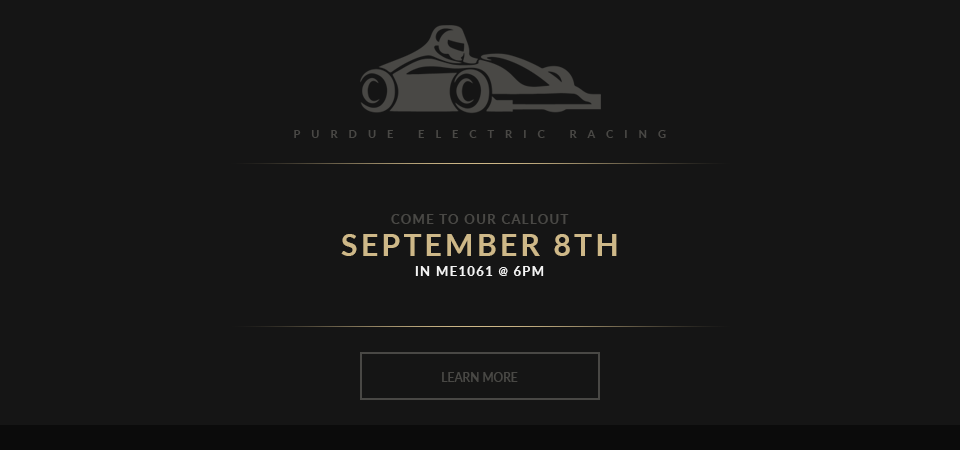
<style>
.page{position:relative;width:960px;height:450px;background:#151515}
.page>*{position:absolute;margin:0}
.t1{font:13.1px "Lato-Bold";letter-spacing:0.1em;color:#494845}
.t2{font:30.4px "Lato-Bold";letter-spacing:0.1em;color:#ceb888;text-transform:uppercase}
.t3{font:13.1px "Lato-Bold";letter-spacing:0.1em;color:#f4f4f4;text-transform:uppercase}
.t4{font:11px "Lato-Bold";letter-spacing:0.1em;color:#f4f4f4;text-transform:uppercase}
.t5{font:12px "Lato-Medium";color:#494845}
</style>
<div class="page">
<p class="t1" style="left:391px;top:214px;width:178px;height:10px">COME TO OUR CALLOUT</p>
<p class="t2" style="left:341px;top:234px;width:276px;height:22px">september 8th</p>
<p class="t3" style="left:415px;top:266px;width:129px;height:10px">in me1061 <span class="t4">@</span> 6pm</p>
<p class="t5" style="left:442px;top:372px;width:76px;height:10px">LEARN MORE</p>
</div>
